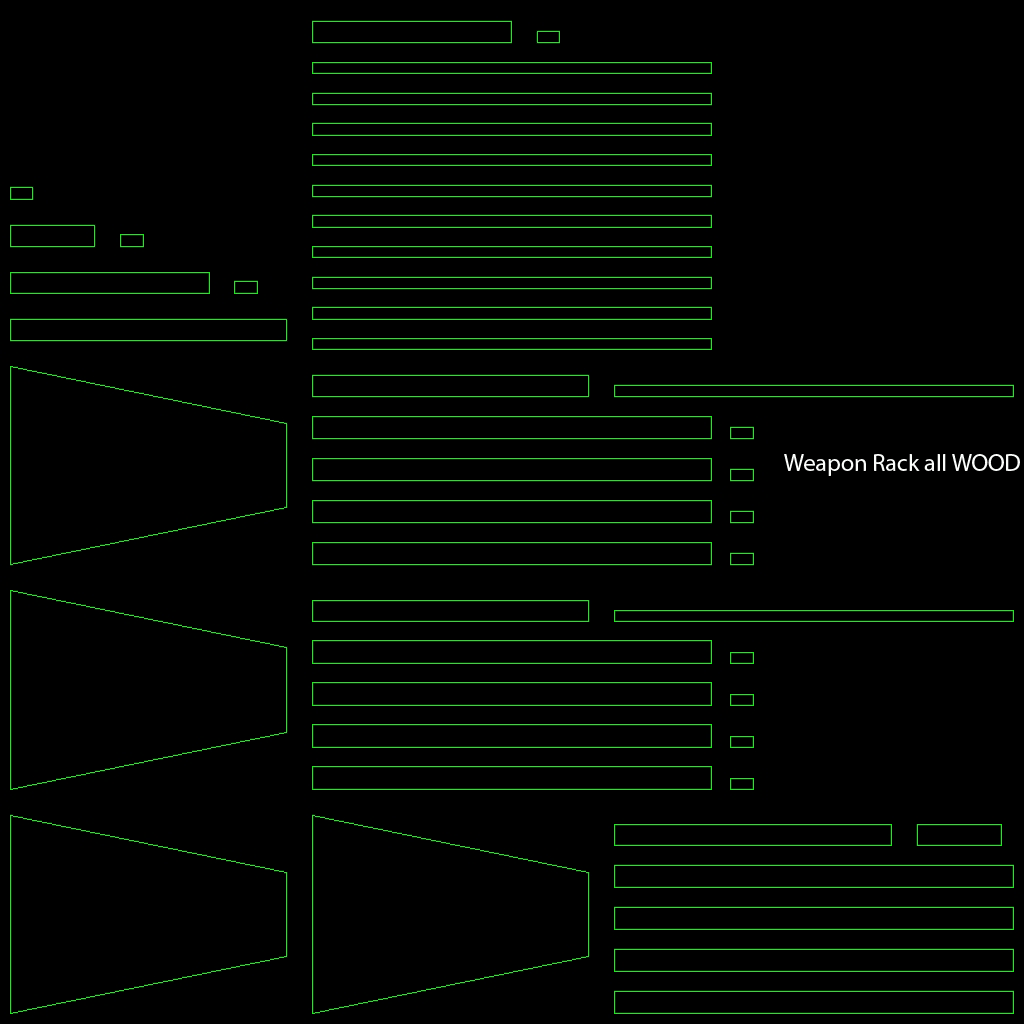
<style>
.page{position:relative;width:1024px;height:1024px;background:#000000}
.page>*{position:absolute;margin:0}
.t1{font:24px "MyriadPro-Regular";color:#fbfdfb}
</style>
<div class="page">
<p class="t1" style="left:784px;top:454px;width:236px;height:22px">Weapon Rack all WOOD</p>
</div>
